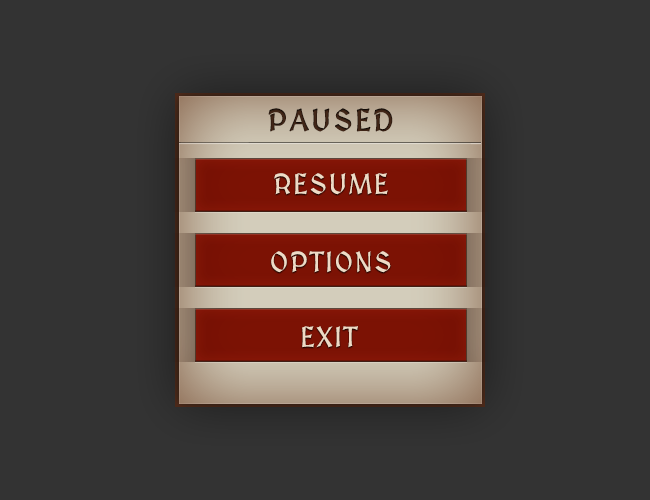
<style>
.page{position:relative;width:650px;height:500px;background:#333333}
.page>*{position:absolute;margin:0}
.t1{font:30px "MedievalSharp";letter-spacing:0.06em;color:#422617;text-transform:uppercase;font-weight:bold}
.t2{font:28px "MedievalSharp";letter-spacing:0.06em;color:#efdbc6;text-transform:uppercase}
</style>
<div class="page">
<p class="t1" style="left:268px;top:108px;width:125px;height:24px">paused</p>
<p class="t2" style="left:274px;top:173px;width:114px;height:22px">resume</p>
<p class="t2" style="left:271px;top:251px;width:120px;height:22px">options</p>
<p class="t2" style="left:302px;top:326px;width:56px;height:22px">exit</p>
</div>
